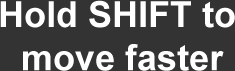
<style>
.page{position:relative;width:235px;height:71px;background:#333333}
.page>*{position:absolute;margin:0}
.t1{font:36px "Arial-BoldMT";color:#ffffff}
</style>
<div class="page">
<p class="t1" style="left:0px;top:0px;width:235px;height:71px;text-align:center">Hold SHIFT to <br>move faster</p>
</div>
